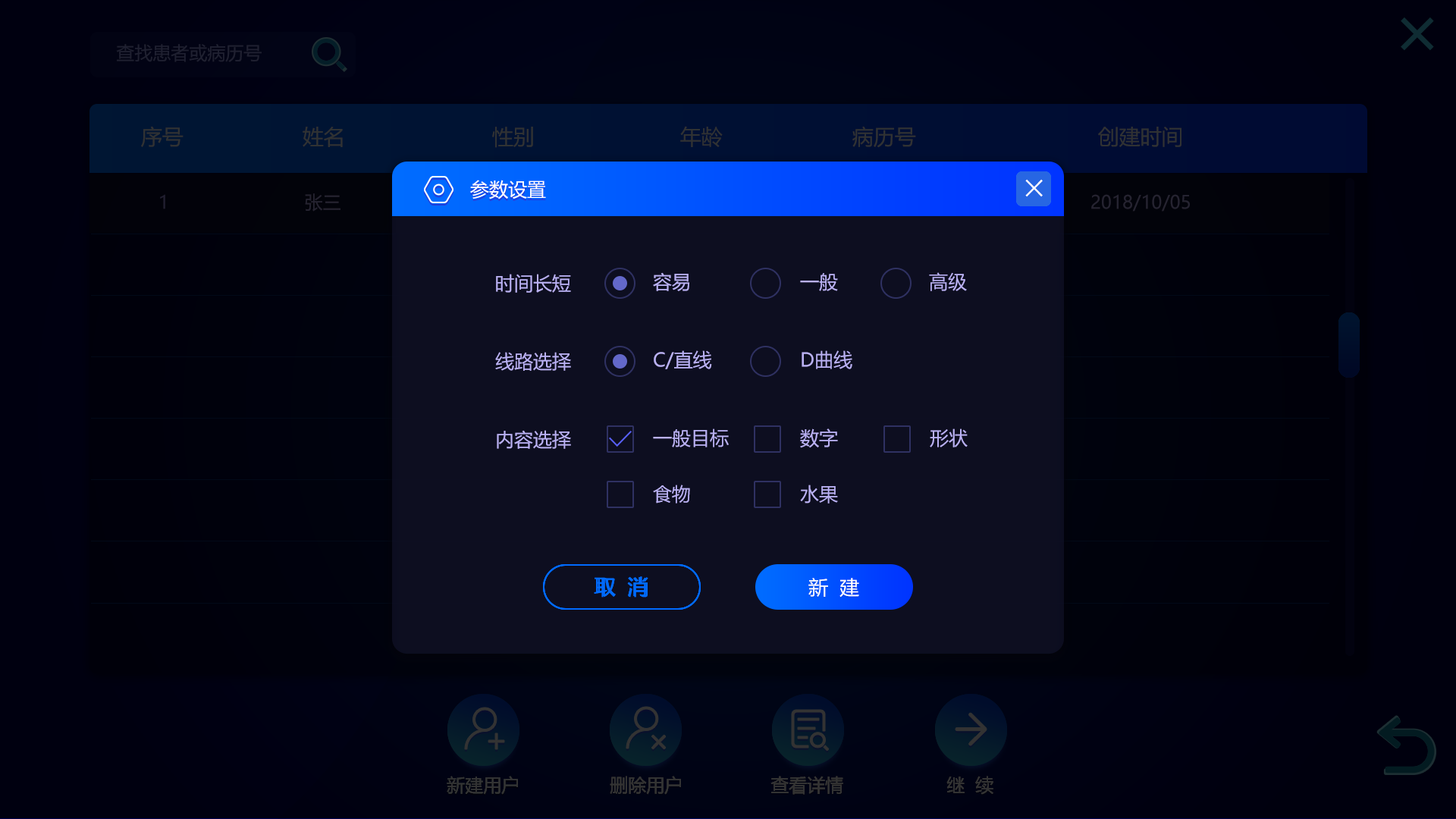
<style>
.page{position:relative;width:1456px;height:819px;background:#0d0e20}
.page>*{position:absolute;margin:0}
.t1{font:19px "MicrosoftYaHei";color:#ffffff}
.t2{font:40.9px "MicrosoftYaHeiLight";color:#ffffff}
.t3{font:19px "MicrosoftYaHei";color:#bab1f4}
.t4{font:21.2px "MicrosoftYaHei";color:#006bff}
.t5{font:19.7px "MicrosoftYaHei";color:#006bff}
.t6{font:19.7px "MicrosoftYaHei";color:#ffffff}
</style>
<div class="page">
<p class="t1" style="left:470px;top:180px;width:76px;height:19px">参数设置</p>
<p class="t2" style="left:1025px;top:179px;width:18px;height:18px">×</p>
<p class="t2" style="left:1025px;top:179px;width:18px;height:18px">×</p>
<p class="t2" style="left:1025px;top:179px;width:18px;height:18px">×</p>
<p class="t3" style="left:496px;top:274px;width:75px;height:19px">时间长短</p>
<p class="t3" style="left:653px;top:272px;width:36px;height:19px">容易</p>
<p class="t3" style="left:800px;top:273px;width:38px;height:18px">一般</p>
<p class="t3" style="left:929px;top:272px;width:38px;height:19px">高级</p>
<p class="t3" style="left:495px;top:352px;width:76px;height:19px">线路选择</p>
<p class="t3" style="left:654px;top:350px;width:58px;height:19px">C/直线</p>
<p class="t3" style="left:802px;top:350px;width:50px;height:19px">D曲线</p>
<p class="t3" style="left:497px;top:430px;width:74px;height:19px">内容选择</p>
<p class="t3" style="left:653px;top:428px;width:76px;height:19px">一般目标</p>
<p class="t3" style="left:800px;top:428px;width:38px;height:20px">数字</p>
<p class="t3" style="left:930px;top:428px;width:38px;height:19px">形状</p>
<p class="t3" style="left:653px;top:485px;width:37px;height:19px">食物</p>
<p class="t3" style="left:800px;top:485px;width:38px;height:19px">水果</p>
<p class="t4" style="left:594px;top:576px;width:54px;height:22px">取  消</p>
<p class="t5" style="left:596px;top:577px;width:50px;height:19px">取  消</p>
<p class="t5" style="left:596px;top:577px;width:50px;height:19px">取  消</p>
<p class="t6" style="left:808px;top:578px;width:51px;height:20px">新  建</p>
</div>
